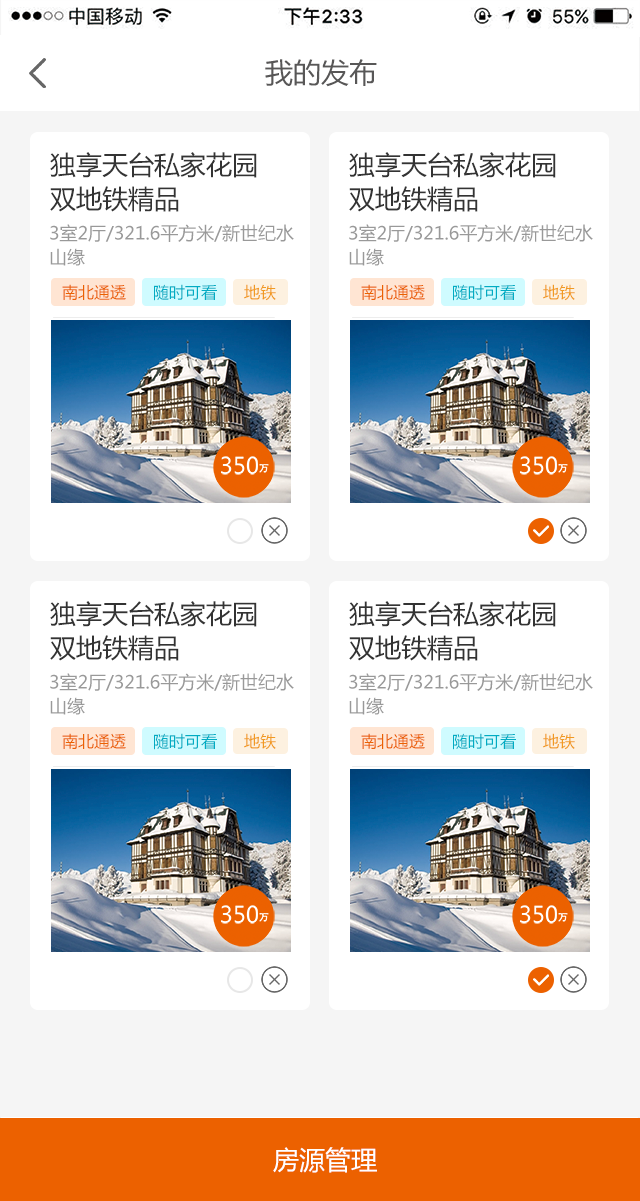
<style>
.page{position:relative;width:640px;height:1201px;background:#ffffff}
.page>*{position:absolute;margin:0}
.t1{font:28px "MicrosoftYaHei";color:#585757}
.t2{font:26px/34px "MicrosoftYaHei";color:#333333}
.t3{font:18px/24px "MicrosoftYaHei";color:#999999}
.t4{font:16px "MicrosoftYaHei";color:#eb6100}
.t5{font:16px "MicrosoftYaHei";color:#00acc3}
.t6{font:16px "MicrosoftYaHei";color:#f19a21}
.t7{font:26px "MicrosoftYaHei";color:#ffffff}
</style>
<div class="page">
<p class="t1" style="left:265px;top:59px;width:112px;height:28px">我的发布</p>
<p class="t2" style="left:50px;top:152px;width:207px;height:60px">独享天台私家花园<br>双地铁精品</p>
<p class="t2" style="left:349px;top:152px;width:207px;height:60px">独享天台私家花园<br>双地铁精品</p>
<p class="t3" style="left:50px;top:224px;width:244px;height:42px">3室2厅/321.6平方米/新世纪水<br>山缘</p>
<p class="t3" style="left:349px;top:224px;width:244px;height:42px">3室2厅/321.6平方米/新世纪水<br>山缘</p>
<p class="t4" style="left:62px;top:284px;width:64px;height:16px">南北通透</p>
<p class="t5" style="left:154px;top:284px;width:63px;height:17px">随时可看</p>
<p class="t6" style="left:244px;top:284px;width:32px;height:17px">地铁</p>
<p class="t4" style="left:361px;top:284px;width:64px;height:16px">南北通透</p>
<p class="t5" style="left:453px;top:284px;width:63px;height:17px">随时可看</p>
<p class="t6" style="left:543px;top:284px;width:32px;height:17px">地铁</p>
<p class="t2" style="left:50px;top:601px;width:207px;height:60px">独享天台私家花园<br>双地铁精品</p>
<p class="t2" style="left:349px;top:601px;width:207px;height:60px">独享天台私家花园<br>双地铁精品</p>
<p class="t3" style="left:50px;top:673px;width:244px;height:42px">3室2厅/321.6平方米/新世纪水<br>山缘</p>
<p class="t3" style="left:349px;top:673px;width:244px;height:42px">3室2厅/321.6平方米/新世纪水<br>山缘</p>
<p class="t4" style="left:62px;top:733px;width:64px;height:16px">南北通透</p>
<p class="t5" style="left:154px;top:733px;width:63px;height:17px">随时可看</p>
<p class="t6" style="left:244px;top:733px;width:32px;height:17px">地铁</p>
<p class="t4" style="left:361px;top:733px;width:64px;height:16px">南北通透</p>
<p class="t5" style="left:453px;top:733px;width:63px;height:17px">随时可看</p>
<p class="t6" style="left:543px;top:733px;width:32px;height:17px">地铁</p>
<p class="t7" style="left:273px;top:1147px;width:104px;height:26px">房源管理</p>
</div>
